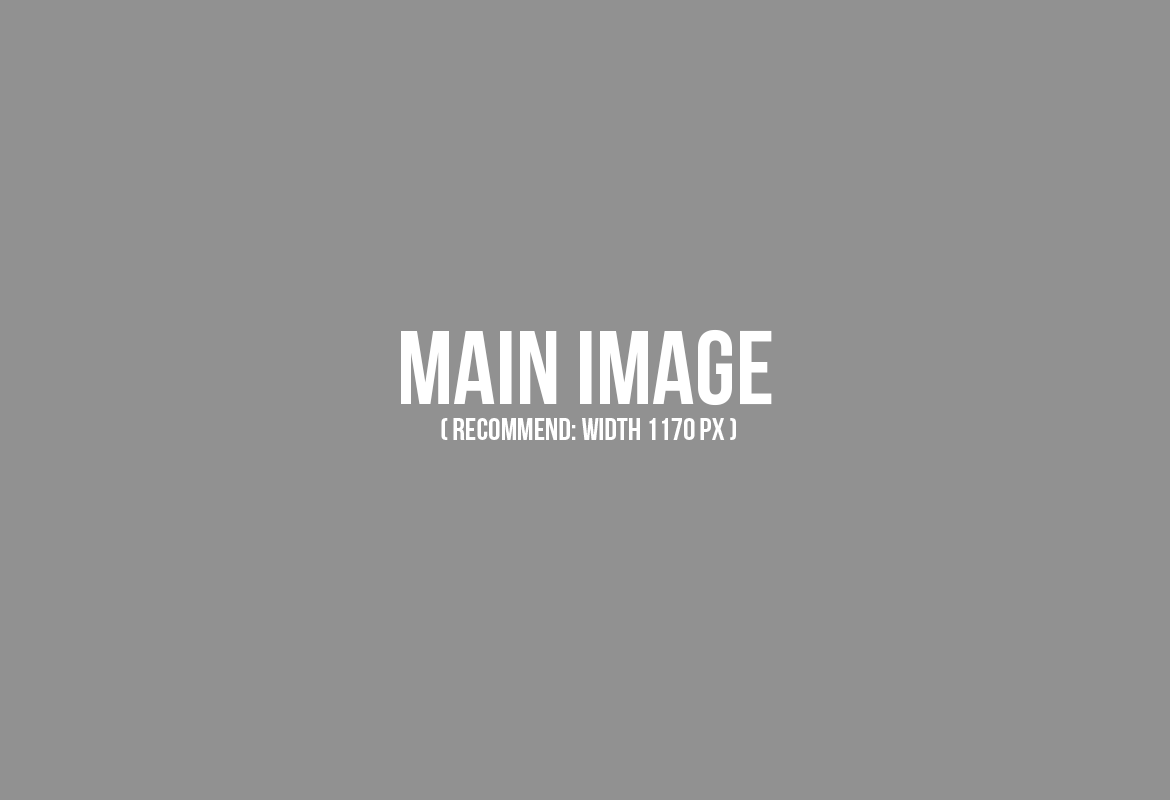
<style>
.page{position:relative;width:1170px;height:800px;background:#919191}
.page>*{position:absolute;margin:0}
.t1{font:103.9px "BebasNeue";color:#ffffff}
.t2{font:30.8px "BebasNeue";color:#ffffff}
</style>
<div class="page">
<p class="t1" style="left:401px;top:329px;width:371px;height:77px">MAIN IMAGE</p>
<p class="t2" style="left:441px;top:418px;width:295px;height:22px">( RECOMMEND: WIDTH 1170 px )</p>
</div>
